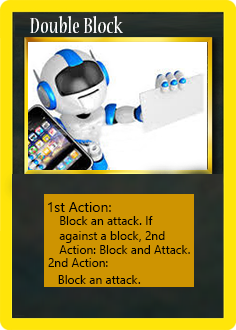
<style>
.page{position:relative;width:236px;height:330px}
.page>*{position:absolute;margin:0}
.t1{font:24px "NuevaStd-Cond";color:#ffffff}
.t2{font:14px "LeelawadeeUI";color:#000000}
.t3{font:12px "LeelawadeeUI";color:#000000}
</style>
<div class="page">
<p class="t1" style="left:30px;top:16px;width:93px;height:17px">Double Block</p>
<p class="t2" style="left:48px;top:202px;width:63px;height:10px">1st Action:</p>
<p class="t3" style="left:59px;top:216px;width:131px;height:38px">Block an attack. If <br>against a block, 2nd <br>Action: Block and Attack.</p>
<p class="t3" style="left:48px;top:258px;width:93px;height:26px">2nd Action:<br>   Block an attack.</p>
</div>
